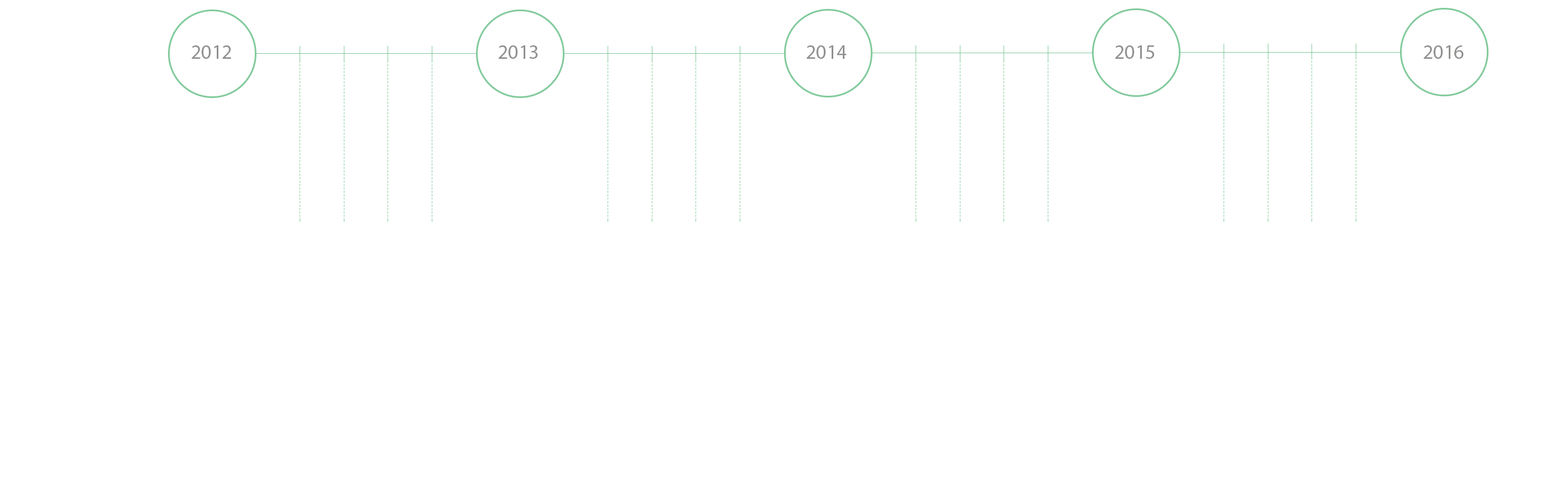
<style>
.page{position:relative;width:1568px;height:504px;background:#ffffff}
.page>*{position:absolute;margin:0}
.t1{font:20.2px "MyriadPro-Regular";color:#91908f}
</style>
<div class="page">
<p class="t1" style="left:192px;top:45px;width:39px;height:14px">2012</p>
<p class="t1" style="left:498px;top:45px;width:40px;height:14px">2013</p>
<p class="t1" style="left:806px;top:45px;width:41px;height:14px">2014</p>
<p class="t1" style="left:1115px;top:45px;width:39px;height:14px">2015</p>
<p class="t1" style="left:1424px;top:45px;width:40px;height:14px">2016</p>
</div>
